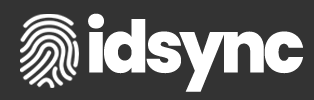
<style>
.page{position:relative;width:314px;height:100px;background:#333333}
.page>*{position:absolute;margin:0}
.t1{font:72px "Poppins-ExtraBold";letter-spacing:-0.06em;color:#ffffff;scale:0.95 1}
</style>
<div class="page">
<p class="t1" style="left:88px;top:13px;width:215px;height:79px">idsync</p>
</div>
